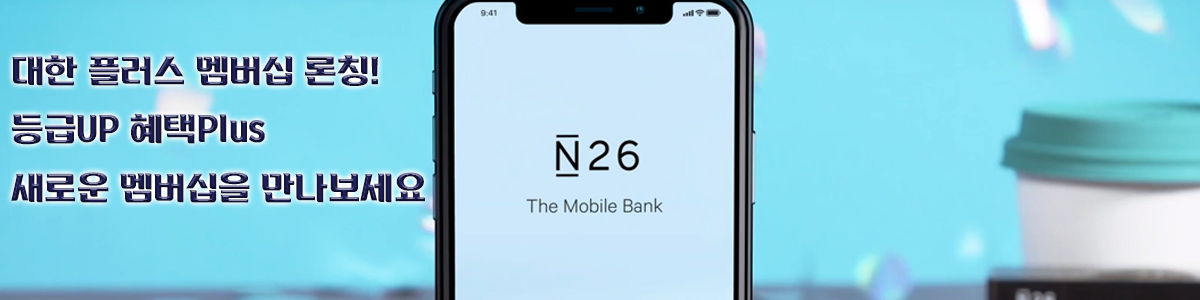
<style>
.page{position:relative;width:1200px;height:300px}
.page>*{position:absolute;margin:0}
.t1{font:33.3px "KoreanSNBR-M"}
</style>
<div class="page">
<p class="t1" style="left:11px;top:55px;width:414px;height:148px">대한 플러스 멤버십 론칭!<br>등급UP 혜택Plus<br>새로운 멤버십을 만나보세요</p>
</div>
